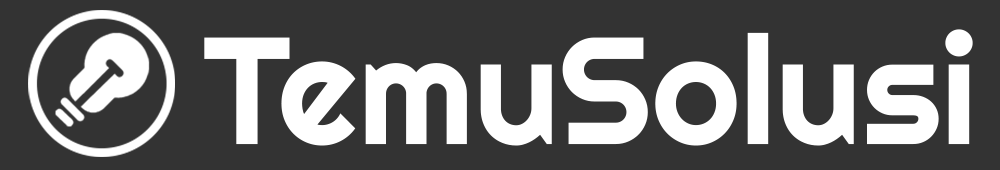
<style>
.page{position:relative;width:1000px;height:170px;background:#333333}
.page>*{position:absolute;margin:0}
.t1{font:152.1px "Righteous-Regular";color:#ffffff}
</style>
<div class="page">
<p class="t1" style="left:204px;top:29px;width:769px;height:117px">TemuSolusi</p>
</div>
